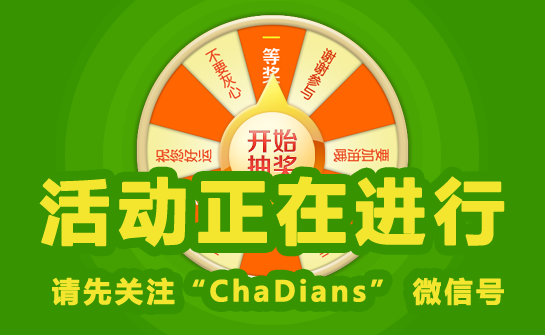
<style>
.page{position:relative;width:545px;height:335px;background:#379300}
.page>*{position:absolute;margin:0}
.t1{font:48px/6px "MicrosoftYaHei-Bold";letter-spacing:0.1em;color:#f4e62f;font-weight:bold}
.t2{font:120px/6px "MicrosoftYaHei-Bold";letter-spacing:0.1em;color:#f4e62f;font-weight:bold}
</style>
<div class="page">
<p class="t1" style="left:39px;top:176px;width:466px;height:130px;text-align:justify"><span class="t2">活动正在进行<br></span> 请先关注“ChaDians” 微信号</p>
</div>
